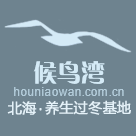
<style>
.page{position:relative;width:136px;height:136px;background:#6e838f}
.page>*{position:absolute;margin:0}
.t1{font:24px "FZCQJW--GB1-0";color:#d4eaf6}
.t2{font:12px "ArialMT";color:#b3ccda}
.t3{font:14px "MicrosoftYaHei";color:#e4f1f8;font-weight:bold}
</style>
<div class="page">
<p class="t1" style="left:33px;top:61px;width:72px;height:23px">候鸟湾</p>
<p class="t2" style="left:14px;top:87px;width:110px;height:9px">houniaowan.com.cn</p>
<p class="t3" style="left:7px;top:101px;width:30px;height:14px">北海</p>
<p class="t3" style="left:45px;top:100px;width:86px;height:15px">养生过冬基地</p>
<p class="t3" style="left:39px;top:108px;width:3px;height:3px">.</p>
</div>
